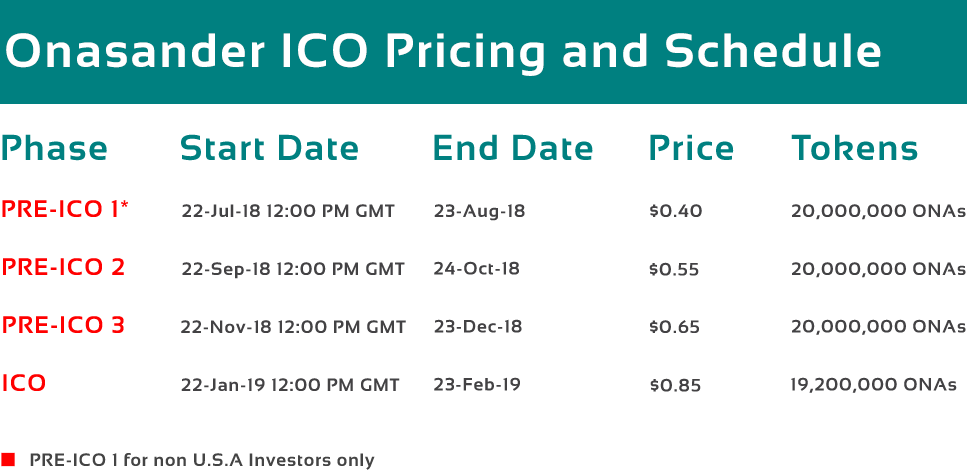
<style>
.page{position:relative;width:967px;height:470px;background:#ffffff}
.page>*{position:absolute;margin:0}
.t1{font:48px "Sansation-Bold";letter-spacing:0.05em;color:#ffffff}
.t2{font:36px "Sansation-Bold";letter-spacing:0.05em;color:#008080}
.t3{font:24px "Sansation-Bold";letter-spacing:0.05em;color:#ff0000}
.t4{font:18px "Sansation-Bold";letter-spacing:0.05em;color:#434244}
.t5{font:18px "Sansation-Bold";letter-spacing:0.05em;color:#444444}
</style>
<div class="page">
<p class="t1" style="left:6px;top:33px;width:875px;height:43px">Onasander ICO Pricing and Schedule</p>
<p class="t2" style="left:2px;top:134px;width:916px;height:27px">Phase  Start Date  End Date  Price  Tokens</p>
<p class="t3" style="left:2px;top:200px;width:126px;height:17px">PRE-ICO 1*</p>
<p class="t4" style="left:182px;top:204px;width:213px;height:13px">22-Jul-18 12:00 PM GMT</p>
<p class="t4" style="left:434px;top:204px;width:91px;height:17px">23-Aug-18</p>
<p class="t4" style="left:650px;top:204px;width:52px;height:13px">$0.40</p>
<p class="t4" style="left:792px;top:204px;width:174px;height:16px">20,000,000 ONAs</p>
<p class="t3" style="left:3px;top:258px;width:121px;height:17px">PRE-ICO 2</p>
<p class="t4" style="left:182px;top:262px;width:223px;height:17px">22-Sep-18 12:00 PM GMT</p>
<p class="t4" style="left:434px;top:261px;width:85px;height:14px">24-Oct-18</p>
<p class="t4" style="left:649px;top:262px;width:50px;height:14px">$0.55</p>
<p class="t4" style="left:792px;top:262px;width:174px;height:16px">20,000,000 ONAs</p>
<p class="t3" style="left:3px;top:316px;width:121px;height:17px">PRE-ICO 3</p>
<p class="t4" style="left:181px;top:320px;width:225px;height:13px">22-Nov-18 12:00 PM GMT</p>
<p class="t4" style="left:434px;top:319px;width:88px;height:14px">23-Dec-18</p>
<p class="t4" style="left:650px;top:320px;width:49px;height:13px">$0.65</p>
<p class="t4" style="left:792px;top:319px;width:174px;height:16px">20,000,000 ONAs</p>
<p class="t3" style="left:3px;top:374px;width:42px;height:17px">ICO</p>
<p class="t4" style="left:434px;top:377px;width:86px;height:14px">23-Feb-19</p>
<p class="t4" style="left:791px;top:377px;width:166px;height:16px">19,200,000 ONAs</p>
<p class="t4" style="left:181px;top:378px;width:219px;height:14px">22-Jan-19 12:00 PM GMT</p>
<p class="t4" style="left:650px;top:378px;width:51px;height:14px">$0.85</p>
<p class="t5" style="left:30px;top:453px;width:345px;height:17px">PRE-ICO 1 for non U.S.A Investors only</p>
</div>
